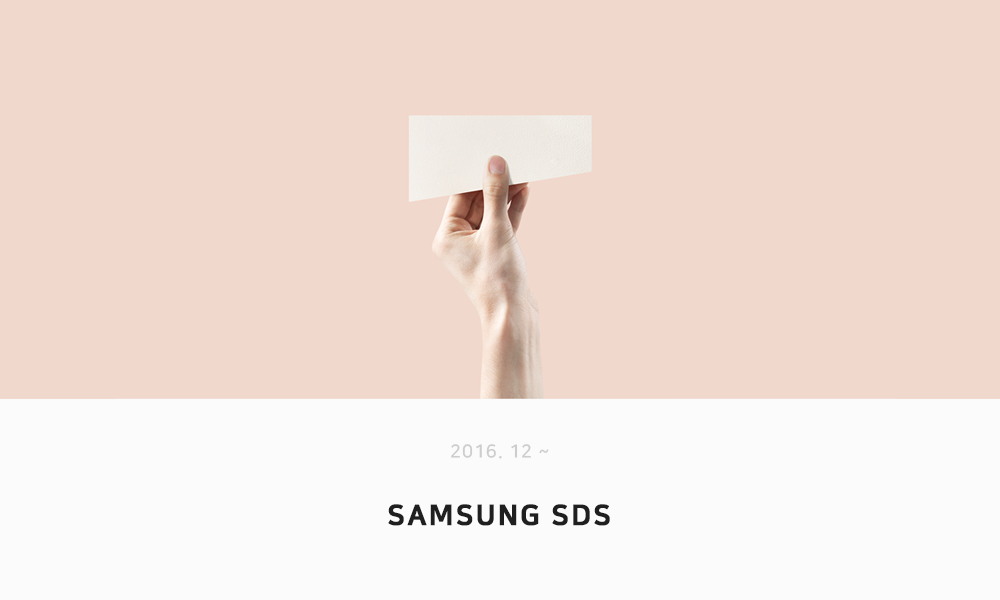
<style>
.page{position:relative;width:1000px;height:600px;background:#f1d8cc}
.page>*{position:absolute;margin:0}
.t1{font:18px "NanumSquareB";letter-spacing:0.05em;color:#cdcdcd}
.t2{font:28px "NanumSquareEB";letter-spacing:0.06em;color:#1f1f1f;text-transform:uppercase;font-weight:bold}
</style>
<div class="page">
<p class="t1" style="left:451px;top:444px;width:98px;height:15px">2016. 12 ~</p>
<p class="t2" style="left:388px;top:504px;width:222px;height:22px">samsung sds</p>
</div>
